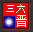
<style>
.page{position:relative;width:33px;height:32px;background:#f20000}
.page>*{position:absolute;margin:0}
.t1{font:10.4px "SimSun";color:#ffffff}
.t2{font:11.7px "SimSun";color:#ffffff}
</style>
<div class="page">
<p class="t1" style="left:6px;top:4px;width:19px;height:9px">三六</p>
<p class="t2" style="left:16px;top:15px;width:11px;height:12px">晋</p>
</div>
